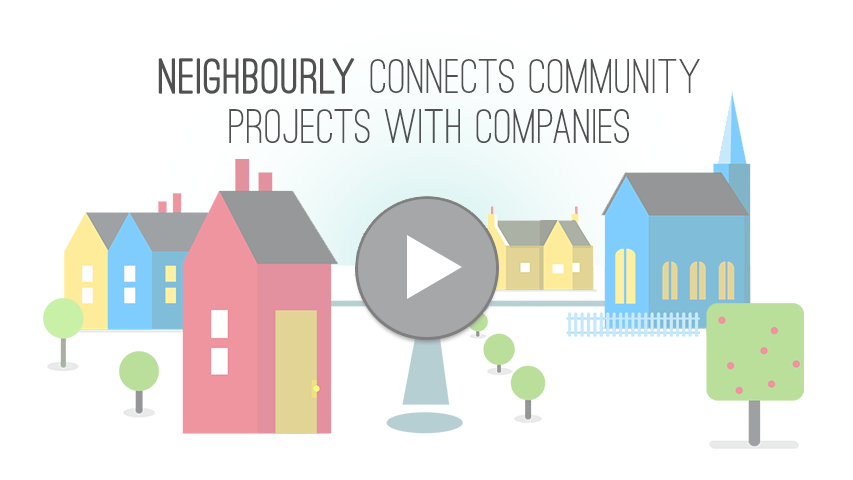
<style>
.page{position:relative;width:853px;height:480px;background:#ffffff}
.page>*{position:absolute;margin:0}
.t1{font:50.1px/50.1px "OstrichSans-Medium";letter-spacing:0.025em;color:#515151}
.t2{font:50.1px/50.1px "OstrichSans-Medium";letter-spacing:0.025em;color:#515151;font-weight:bold}
</style>
<div class="page">
<p class="t1" style="left:158px;top:58px;width:542px;height:85px;text-align:center"><span class="t2">Neighbourly </span>connects community<br>projects with companies</p>
</div>
